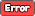
<style>
.page{position:relative;width:35px;height:16px}
.page>*{position:absolute;margin:0}
.t1{font:10px "ChalkboardSE-Bold";color:#ffffff}
</style>
<div class="page">
<p class="t1" style="left:5px;top:4px;width:25px;height:8px">Error</p>
</div>
